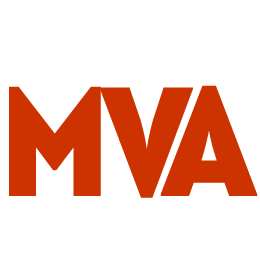
<style>
.page{position:relative;width:260px;height:260px;background:#ffffff}
.page>*{position:absolute;margin:0}
.t1{font:155px "IntroCondBlackFree";color:#cc3300}
</style>
<div class="page">
<p class="t1" style="left:9px;top:85px;width:249px;height:113px">MVA</p>
</div>
